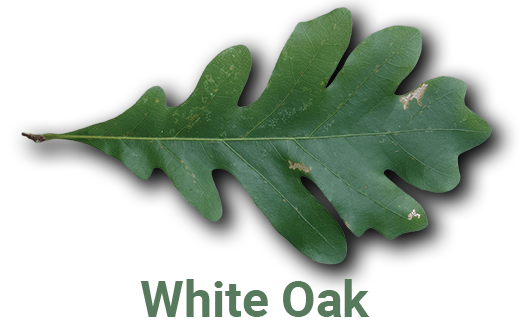
<style>
.page{position:relative;width:520px;height:330px;background:#ffffff}
.page>*{position:absolute;margin:0}
.t1{font:50px "Roboto-Bold";color:#577a5c}
</style>
<div class="page">
<p class="t1" style="left:140px;top:279px;width:230px;height:38px">White Oak</p>
</div>
